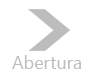
<style>
.page{position:relative;width:96px;height:80px;background:#ffffff}
.page>*{position:absolute;margin:0}
.t1{font:18px "SegoeUI";color:#bdbdbd}
</style>
<div class="page">
<p class="t1" style="left:12px;top:55px;width:69px;height:14px">Abertura</p>
</div>
